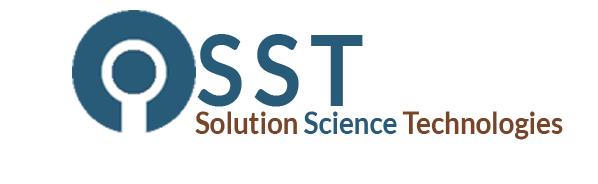
<style>
.page{position:relative;width:598px;height:184px;background:#ffffff}
.page>*{position:absolute;margin:0}
.t1{font:98px "Lato-Bold";letter-spacing:0.1em;color:#285b78;scale:0.92 1}
.t2{font:30px "Lato-Bold";color:#784528;scale:0.92 1}
.t3{font:30px "Lato-Bold";color:#285b78;scale:0.92 1}
</style>
<div class="page">
<p class="t1" style="left:197px;top:34px;width:166px;height:73px">SST</p>
<p class="t2" style="left:195px;top:111px;width:368px;height:29px">Solution <span class="t3">Science </span>Technologies</p>
</div>
